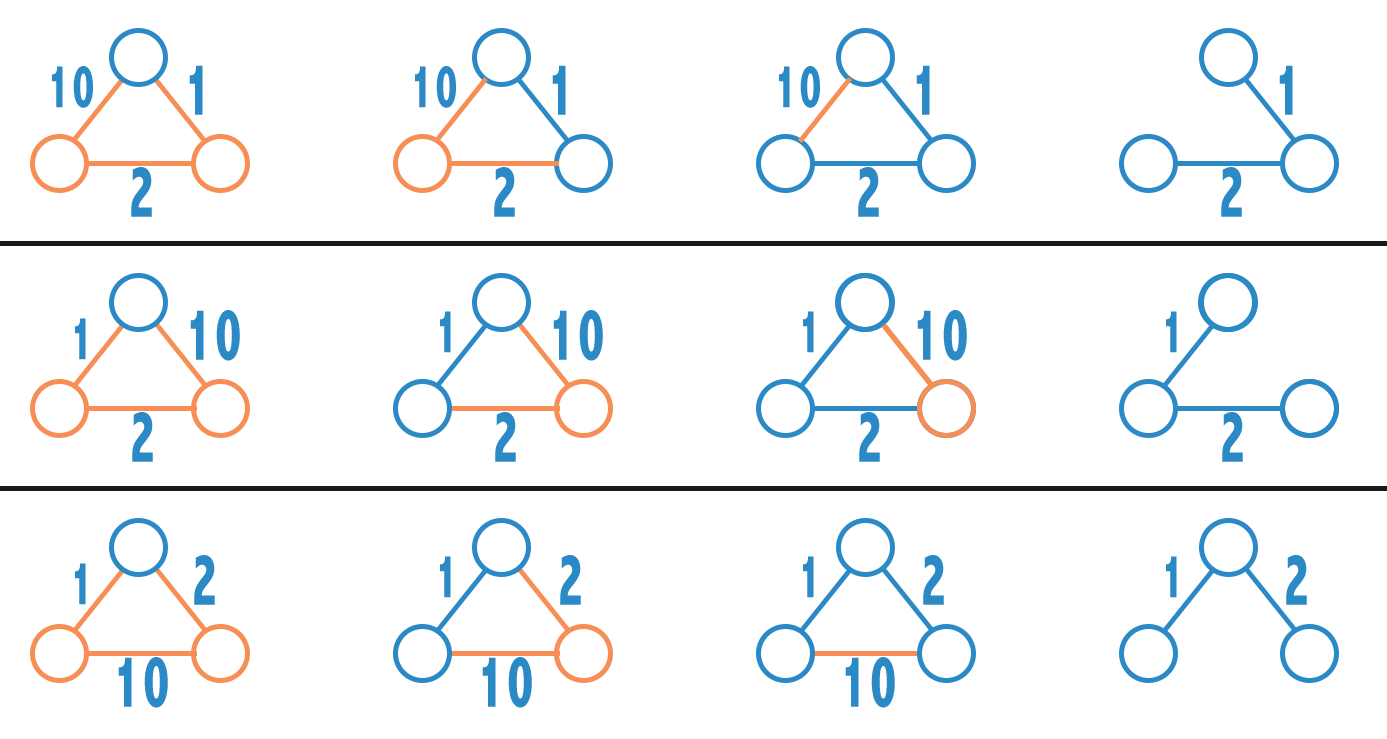
<style>
.page{position:relative;width:1387px;height:739px;background:#ffffff}
.page>*{position:absolute;margin:0}
.t1{font:75px "AbadiMT-CondensedExtraBold";letter-spacing:0.075em;color:#2b89c5;scale:0.68 1}
.t2{font:62.4px "AbadiMT-CondensedExtraBold";letter-spacing:0.075em;color:#2b89c5;scale:0.68 1}
</style>
<div class="page">
<p class="t1" style="left:189px;top:65px;width:14px;height:50px">1</p>
<p class="t1" style="left:552px;top:65px;width:14px;height:50px">1</p>
<p class="t1" style="left:916px;top:65px;width:14px;height:50px">1</p>
<p class="t1" style="left:1279px;top:65px;width:14px;height:50px">1</p>
<p class="t2" style="left:52px;top:66px;width:41px;height:42px">10</p>
<p class="t2" style="left:415px;top:66px;width:41px;height:42px">10</p>
<p class="t2" style="left:779px;top:66px;width:41px;height:42px">10</p>
<p class="t1" style="left:131px;top:167px;width:21px;height:50px">2</p>
<p class="t1" style="left:494px;top:167px;width:21px;height:50px">2</p>
<p class="t1" style="left:858px;top:167px;width:21px;height:50px">2</p>
<p class="t1" style="left:1221px;top:167px;width:21px;height:50px">2</p>
<p class="t2" style="left:75px;top:318px;width:11px;height:42px">1</p>
<p class="t1" style="left:190px;top:310px;width:50px;height:51px">10</p>
<p class="t2" style="left:440px;top:311px;width:11px;height:42px">1</p>
<p class="t1" style="left:553px;top:310px;width:50px;height:51px">10</p>
<p class="t2" style="left:803px;top:311px;width:11px;height:42px">1</p>
<p class="t1" style="left:917px;top:310px;width:50px;height:51px">10</p>
<p class="t2" style="left:1166px;top:311px;width:11px;height:42px">1</p>
<p class="t1" style="left:132px;top:412px;width:21px;height:50px">2</p>
<p class="t1" style="left:495px;top:412px;width:21px;height:50px">2</p>
<p class="t1" style="left:859px;top:412px;width:21px;height:50px">2</p>
<p class="t1" style="left:1222px;top:412px;width:21px;height:50px">2</p>
<p class="t1" style="left:194px;top:555px;width:21px;height:50px">2</p>
<p class="t2" style="left:440px;top:556px;width:11px;height:42px">1</p>
<p class="t1" style="left:560px;top:555px;width:21px;height:50px">2</p>
<p class="t2" style="left:803px;top:556px;width:11px;height:42px">1</p>
<p class="t1" style="left:923px;top:555px;width:21px;height:50px">2</p>
<p class="t2" style="left:1166px;top:556px;width:11px;height:42px">1</p>
<p class="t1" style="left:1286px;top:555px;width:21px;height:50px">2</p>
<p class="t2" style="left:75px;top:563px;width:11px;height:42px">1</p>
<p class="t1" style="left:118px;top:657px;width:50px;height:51px">10</p>
<p class="t1" style="left:482px;top:657px;width:50px;height:51px">10</p>
<p class="t1" style="left:845px;top:657px;width:50px;height:51px">10</p>
</div>
